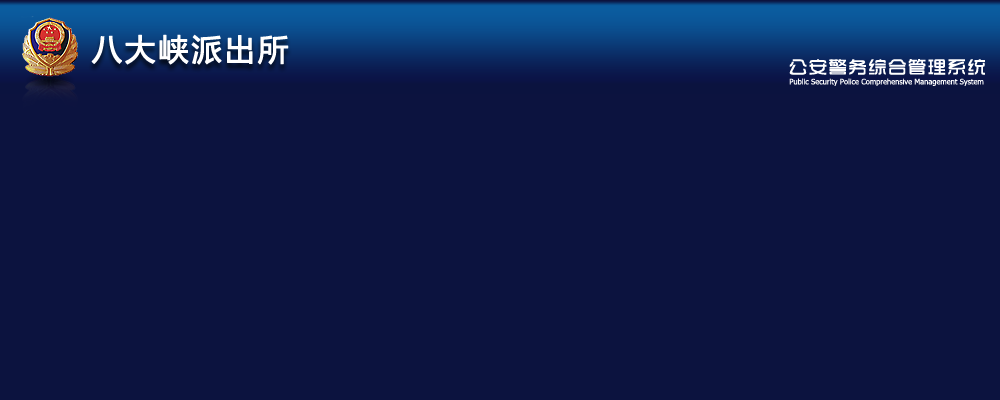
<style>
.page{position:relative;width:1000px;height:400px;background:#0c133f}
.page>*{position:absolute;margin:0}
.t1{font:30px "MicrosoftYaHei";letter-spacing:0.08em;color:#ffffff;font-weight:bold}
.t2{font:18.4px "TRENDS";letter-spacing:0.08em;color:#ffffff}
.t3{font:7.5px "Tahoma";color:#ffffff}
</style>
<div class="page">
<p class="t1" style="left:91px;top:34px;width:198px;height:31px">八大峡派出所</p>
<p class="t2" style="left:789px;top:59px;width:196px;height:16px">公安警务综合管理系统</p>
<p class="t3" style="left:789px;top:78px;width:195px;height:8px">Public Security Police Comprehensive Management System</p>
</div>
